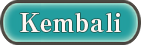
<style>
.page{position:relative;width:141px;height:45px}
.page>*{position:absolute;margin:0}
.t1{font:26px "RyuminPro-ExBold";color:#fff6f3}
</style>
<div class="page">
<p class="t1" style="left:20px;top:13px;width:101px;height:19px">Kembali</p>
</div>
